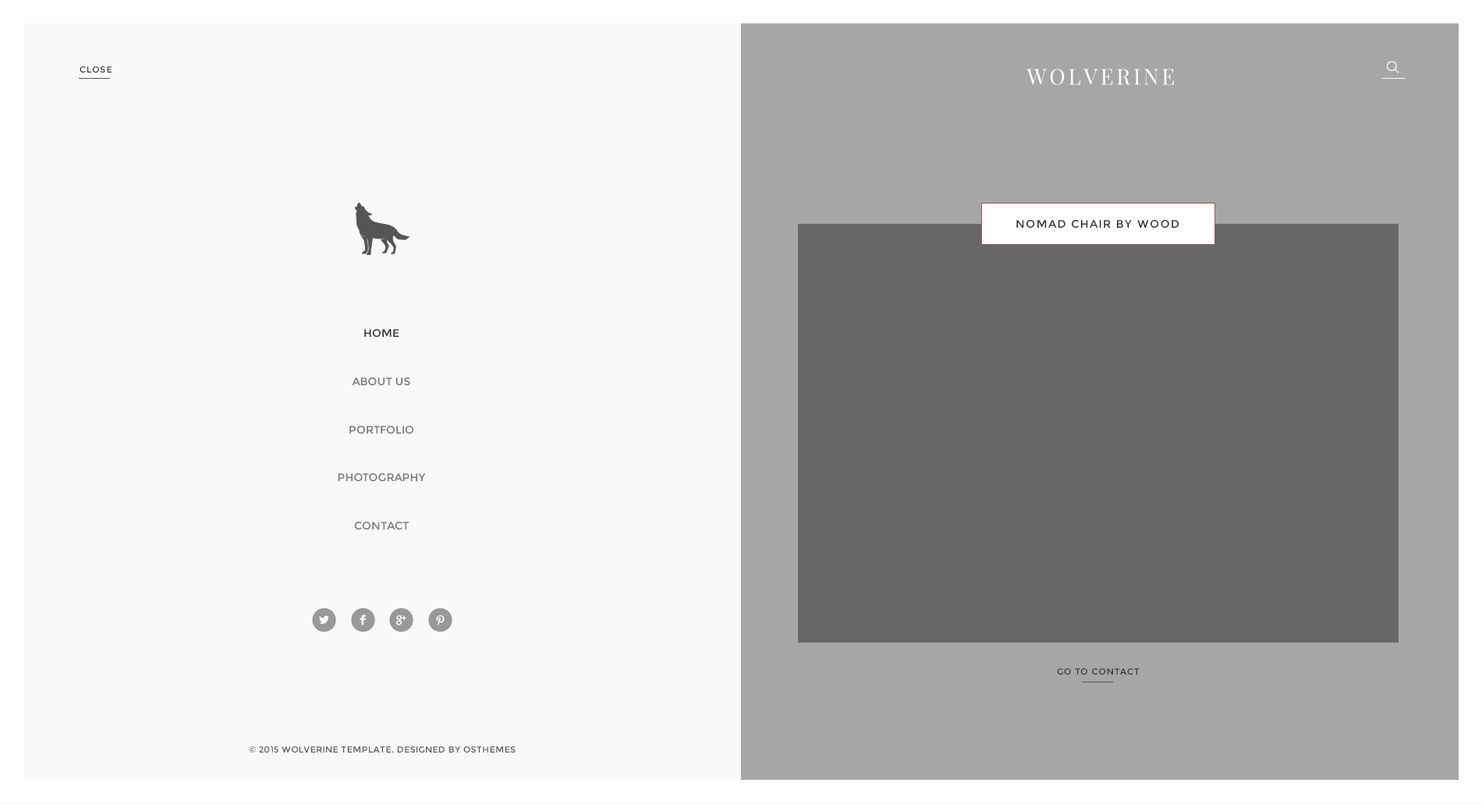
<style>
.page{position:relative;width:1482px;height:804px;background:#f9f9f9}
.page>*{position:absolute;margin:0}
.t1{font:8.6px "Montserrat-Regular";letter-spacing:0.1em;color:#333333}
.t2{font:21.6px "PlayfairDisplay-Regular";letter-spacing:0.1em;color:#ffffff}
.t3{font:10.9px "Montserrat-Regular";letter-spacing:0.1em;color:#333333}
.t4{font:10.9px/24px "Montserrat-Regular";color:#777777}
.t5{font:10.9px/24px "Montserrat-Regular";color:#333333}
.t6{font:8.6px "Montserrat-Regular";letter-spacing:0.04em;color:#555555}
</style>
<div class="page">
<p class="t1" style="left:80px;top:66px;width:32px;height:7px">CLOSE</p>
<p class="t2" style="left:1027px;top:69px;width:147px;height:16px">WOLVERINE</p>
<p class="t3" style="left:1017px;top:220px;width:163px;height:8px">NOMAD CHAIR BY WOOD</p>
<p class="t4" style="left:338px;top:329px;width:88px;height:201px;text-align:center"><span class="t5">HOME</span><br><br>ABOUT US<br><br>PORTFOLIO<br><br>PHOTOGRAPHY<br><br>CONTACT</p>
<p class="t1" style="left:1057px;top:669px;width:83px;height:6px">GO TO CONTACT</p>
<p class="t6" style="left:249px;top:747px;width:267px;height:7px">© 2015 WOLVERINE TEMPLATE. DESIGNED BY OSTHEMES</p>
</div>
